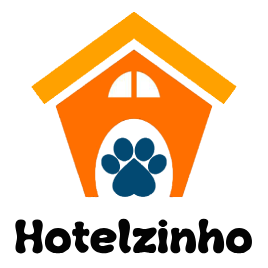
<style>
.page{position:relative;width:268px;height:268px;background:#ffffff}
.page>*{position:absolute;margin:0}
.t1{font:41.7px "Kush-Fat";color:#030303}
</style>
<div class="page">
<p class="t1" style="left:15px;top:218px;width:237px;height:36px">Hotelzinho</p>
</div>
